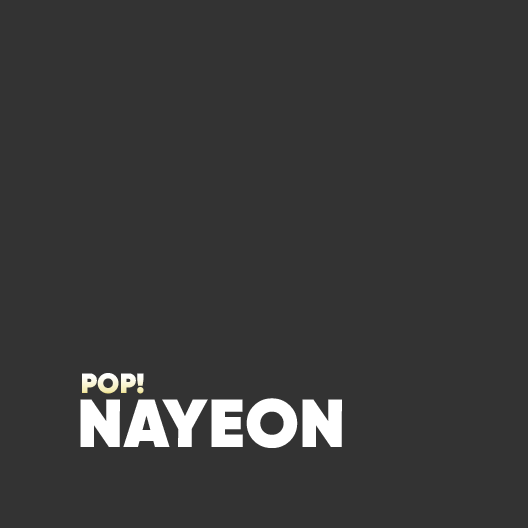
<style>
.page{position:relative;width:528px;height:528px;background:#333333}
.page>*{position:absolute;margin:0}
.t1{font:28px "Gilroy-Heavy"}
.t2{font:68px "Gilroy-Heavy";color:#ffffff}
</style>
<div class="page">
<p class="t1" style="left:82px;top:373px;width:62px;height:21px">POP!</p>
<p class="t2" style="left:80px;top:398px;width:262px;height:50px">NAYEON</p>
</div>
